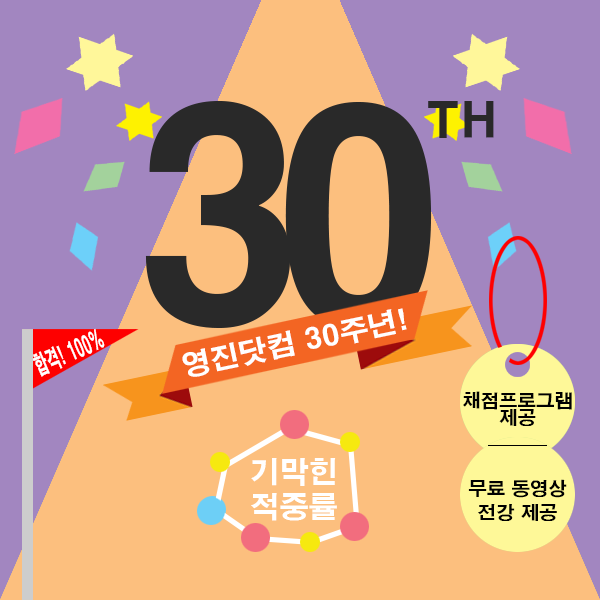
<style>
.page{position:relative;width:600px;height:600px;background:#fcbf7e}
.page>*{position:absolute;margin:0}
.t1{font:48px "H2gtrE";color:#292929}
.t2{font:27.8px "H2gtrE";color:#ffffff;scale:1.04 1}
.t3{font:25.2px "H2gtrE";color:#ffffff;scale:0.52 1}
.t4{font:18.3px "H2gtrE";color:#000000}
.t5{font:29px "H2gtrE";color:#ffffff}
</style>
<div class="page">
<p class="t1" style="left:428px;top:101px;width:66px;height:37px">TH</p>
<p class="t2" style="left:182px;top:308px;width:225px;height:69px;rotate:-12deg">영진닷컴 30주년!</p>
<p class="t3" style="left:32px;top:328px;width:73px;height:49px;rotate:-23deg">합격! 100%</p>
<p class="t4" style="left:463px;top:391px;width:109px;height:19px">채점프로그램</p>
<p class="t4" style="left:499px;top:409px;width:37px;height:17px">제공</p>
<p class="t5" style="left:251px;top:458px;width:86px;height:63px">기막힌<br>적중률</p>
<p class="t4" style="left:468px;top:479px;width:99px;height:19px">무료 동영상</p>
<p class="t4" style="left:478px;top:504px;width:79px;height:17px">전강 제공</p>
</div>
